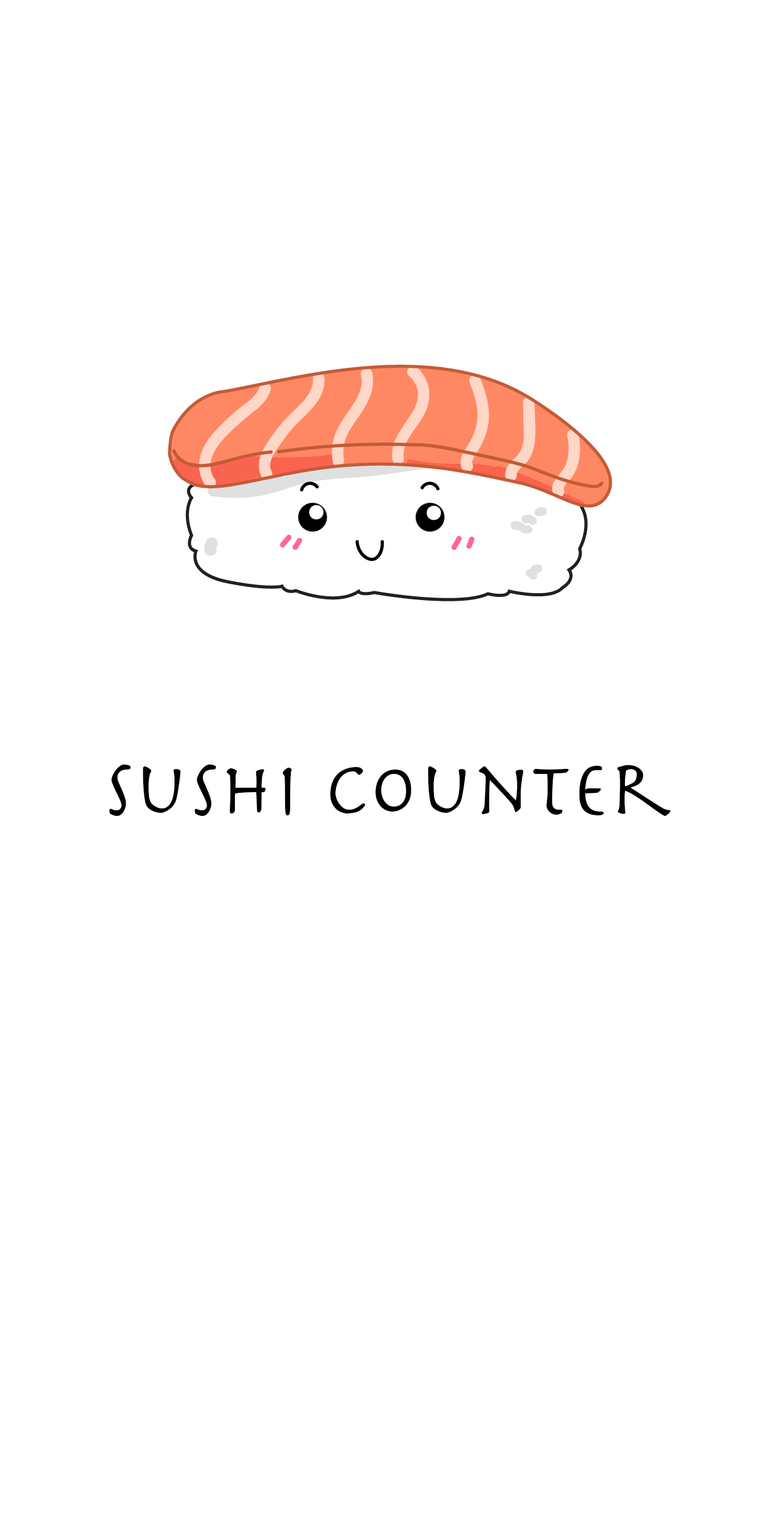
<style>
.page{position:relative;width:780px;height:1529px;background:#ffffff}
.page>*{position:absolute;margin:0}
.t1{font:78.5px "Herculanum";color:#000000}
</style>
<div class="page">
<p class="t1" style="left:109px;top:765px;width:561px;height:51px">Sushi Counter</p>
</div>
